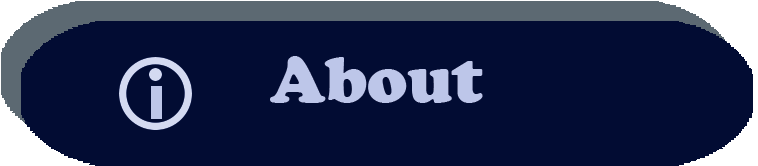
<style>
.page{position:relative;width:758px;height:166px;background:#020c33}
.page>*{position:absolute;margin:0}
.t1{font:66.7px "CooperBlack";color:#d4daf1}
</style>
<div class="page">
<p class="t1" style="left:270px;top:56px;width:213px;height:47px">About</p>
</div>
